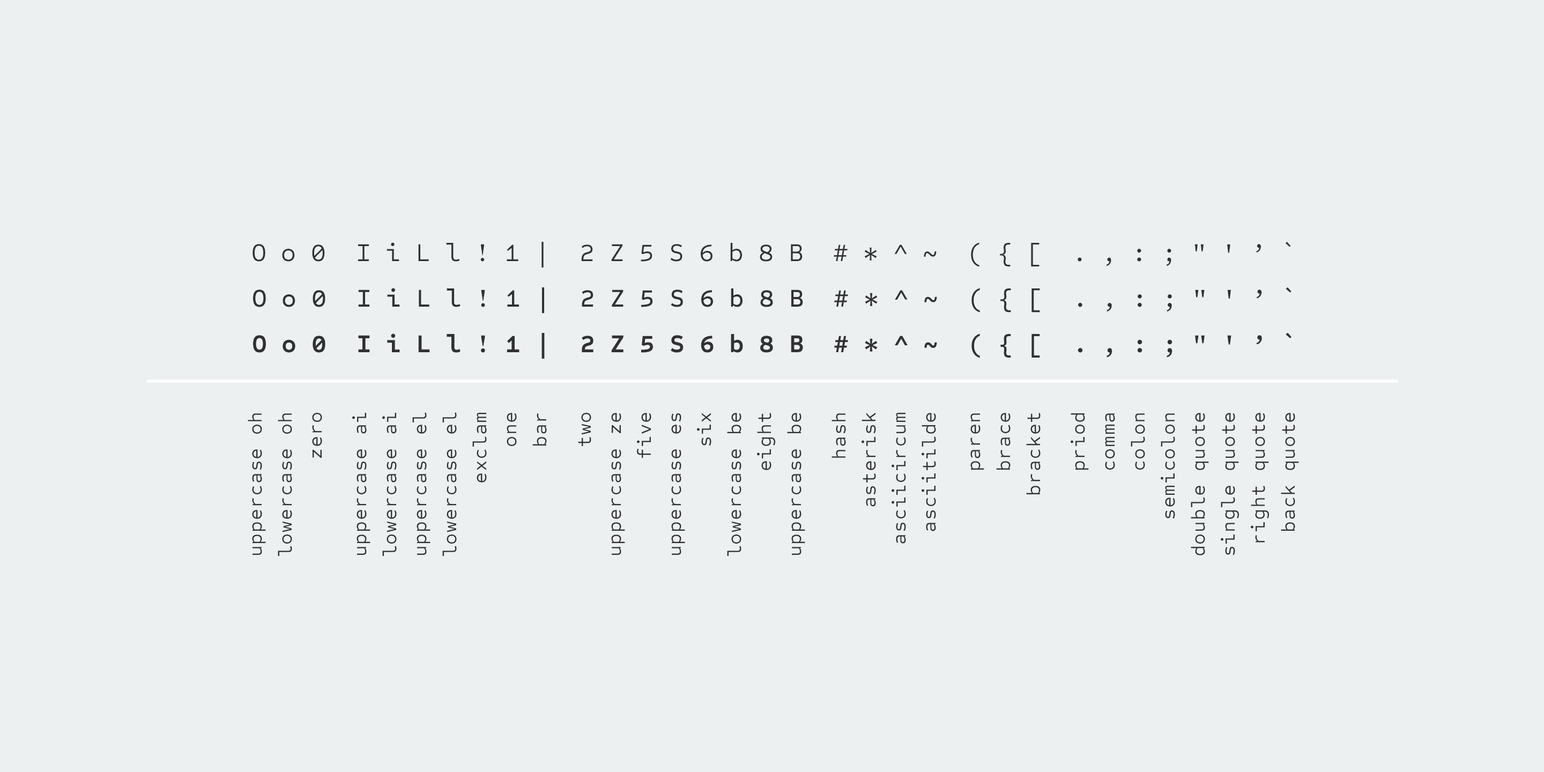
<style>
.page{position:relative;width:1544px;height:772px;background:#ecf0f1}
.page>*{position:absolute;margin:0}
.t1{font:25.7px "SometypeMono-Regular";color:#313131}
.t2{font:25.7px "SometypeMono-Medium";color:#313131}
.t3{font:25.7px "SometypeMono-Bold";color:#313131}
.t4{font:19.3px/30px "SometypeMono-Regular";letter-spacing:0.05em;color:#313131}
</style>
<div class="page">
<p class="t1" style="left:253px;top:242px;width:1038px;height:26px">O o 0  I i L l ! 1 |  2 Z 5 S 6 b 8 B  # * ^ ~  ( { [  . , : ; " ' ’ `</p>
<p class="t2" style="left:253px;top:287px;width:1039px;height:26px">O o 0  I i L l ! 1 |  2 Z 5 S 6 b 8 B  # * ^ ~  ( { [  . , : ; " ' ’ `</p>
<p class="t3" style="left:253px;top:332px;width:1039px;height:27px">O o 0  I i L l ! 1 |  2 Z 5 S 6 b 8 B  # * ^ ~  ( { [  . , : ; " ' ’ `</p>
<p class="t4" style="left:248px;top:412px;width:1051px;height:144px;text-align:right;rotate:-90deg">uppercase oh<br>lowercase oh<br>zero<br><br>uppercase ai<br>lowercase ai<br>uppercase el<br>lowercase el<br>exclam<br>one<br>bar<br><br>two<br>uppercase ze<br>five<br>uppercase es<br>six<br>lowercase be<br>eight<br>uppercase be<br><br>hash<br>asterisk<br>asciicircum<br>asciitilde<br><br>paren<br>brace<br>bracket<br><br>priod<br>comma<br>colon<br>semicolon<br>double quote<br>single quote<br>right quote<br>back quote</p>
</div>
